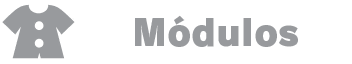
<style>
.page{position:relative;width:352px;height:64px;background:#ffffff}
.page>*{position:absolute;margin:0}
.t1{font:36px "RodinPro-UB";color:#989a9d}
</style>
<div class="page">
<p class="t1" style="left:135px;top:15px;width:163px;height:32px">Módulos</p>
</div>
